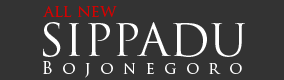
<style>
.page{position:relative;width:284px;height:80px;background:#333333}
.page>*{position:absolute;margin:0}
.t1{font:16.7px "TrajanPro-Regular";color:#d60000}
.t2{font:44.6px "TrajanPro-Regular";color:#ffffff}
.t3{font:16.7px "TrajanPro-Regular";letter-spacing:0.56em;color:#ffffff}
</style>
<div class="page">
<p class="t1" style="left:43px;top:6px;width:74px;height:11px">all new</p>
<p class="t2" style="left:43px;top:22px;width:202px;height:35px">SIPPADU</p>
<p class="t3" style="left:43px;top:61px;width:199px;height:17px">Bojonegoro</p>
</div>
